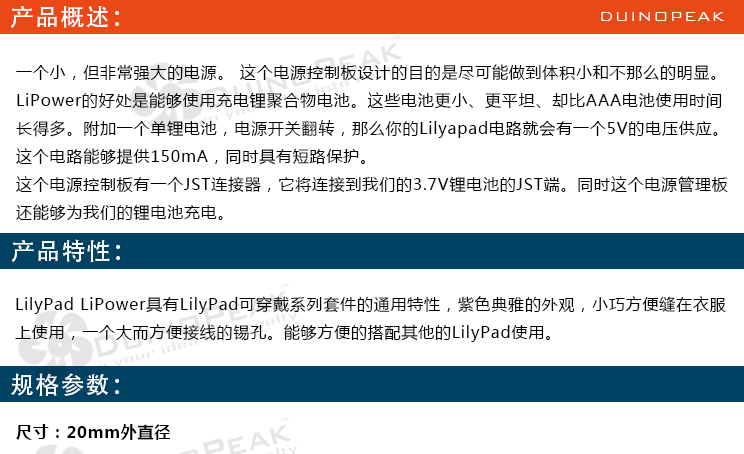
<style>
.page{position:relative;width:744px;height:454px;background:#ffffff}
.page>*{position:absolute;margin:0}
.t1{font:24px "AdobeHeitiStd-Regular";letter-spacing:0.05em;color:#ffffff}
.t2{font:18px "BankGothicBT-Light";letter-spacing:0.05em;color:#ffffff}
.t3{font:16px "MicrosoftYaHei";letter-spacing:0.05em;color:#000000}
.t4{font:16px "MicrosoftYaHei-Bold";letter-spacing:0.05em;color:#000000}
</style>
<div class="page">
<p class="t1" style="left:10px;top:6px;width:109px;height:23px">产品概述：</p>
<p class="t2" style="left:601px;top:12px;width:124px;height:9px">DUINOPEAK</p>
<p class="t3" style="left:16px;top:64px;width:712px;height:157px">一个小，但非常强大的电源。 这个电源控制板设计的目的是尽可能做到体积小和不那么的明显。<br>LiPower的好处是能够使用充电锂聚合物电池。这些电池更小、更平坦、却比AAA电池使用时间<br>长得多。附加一个单锂电池，电源开关翻转，那么你的Lilyapad电路就会有一个5V的电压供应。<br>这个电路能够提供150mA，同时具有短路保护。<br>这个电源控制板有一个JST连接器，它将连接到我们的3.7V锂电池的JST端。同时这个电源管理板<br>还能够为我们的锂电池充电。</p>
<p class="t1" style="left:11px;top:239px;width:109px;height:24px">产品特性：</p>
<p class="t3" style="left:15px;top:296px;width:711px;height:46px">LilyPad LiPower具有LilyPad可穿戴系列套件的通用特性，紫色典雅的外观，小巧方便缝在衣服<br>上使用，一个大而方便接线的锡孔。能够方便的搭配其他的LilyPad使用。</p>
<p class="t1" style="left:11px;top:373px;width:108px;height:23px">规格参数：</p>
<p class="t4" style="left:16px;top:424px;width:155px;height:16px">尺寸：20mm外直径</p>
</div>
